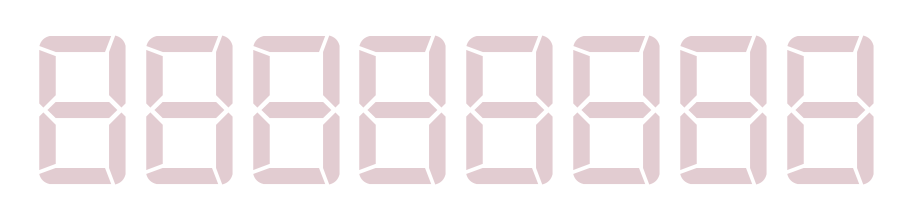
<style>
.page{position:relative;width:921px;height:218px;background:#ffffff}
.page>*{position:absolute;margin:0}
.t1{font:225.9px "Digital-7";color:#e2ccd1}
</style>
<div class="page">
<p class="t1" style="left:39px;top:35px;width:835px;height:150px">88888888</p>
</div>
